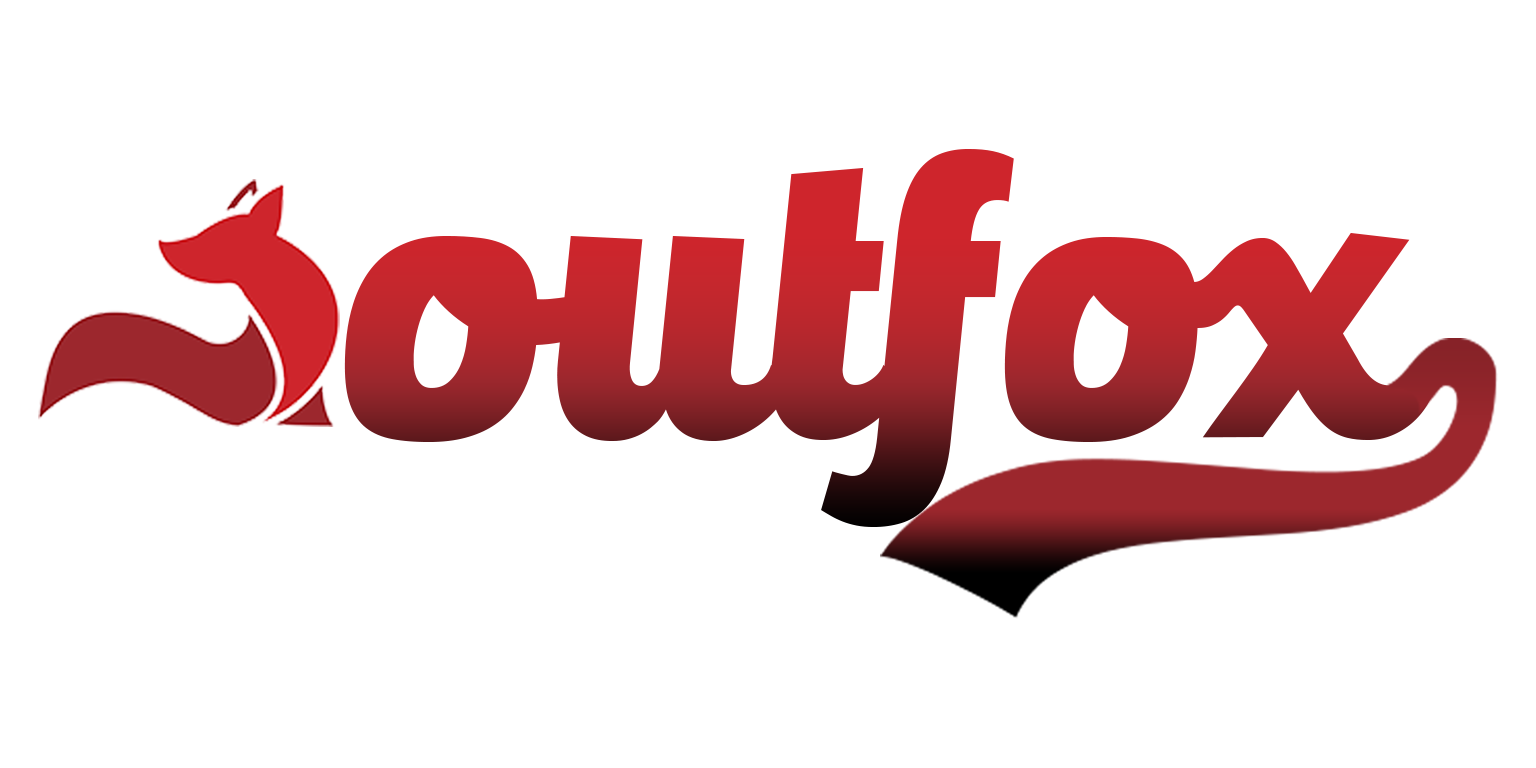
<style>
.page{position:relative;width:1536px;height:768px;background:#ffffff}
.page>*{position:absolute;margin:0}
.t1{font:375.2px "BullettoKilla"}
</style>
<div class="page">
<p class="t1" style="left:344px;top:149px;width:1091px;height:378px">outfox</p>
</div>
